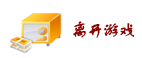
<style>
.page{position:relative;width:142px;height:58px;background:#ffffff}
.page>*{position:absolute;margin:0}
.t1{font:18px "FZSTK--GBK1-0";letter-spacing:-0.14em;color:#8a0303;font-weight:bold}
</style>
<div class="page">
<p class="t1" style="left:73px;top:21px;width:61px;height:17px">离开游戏</p>
</div>
